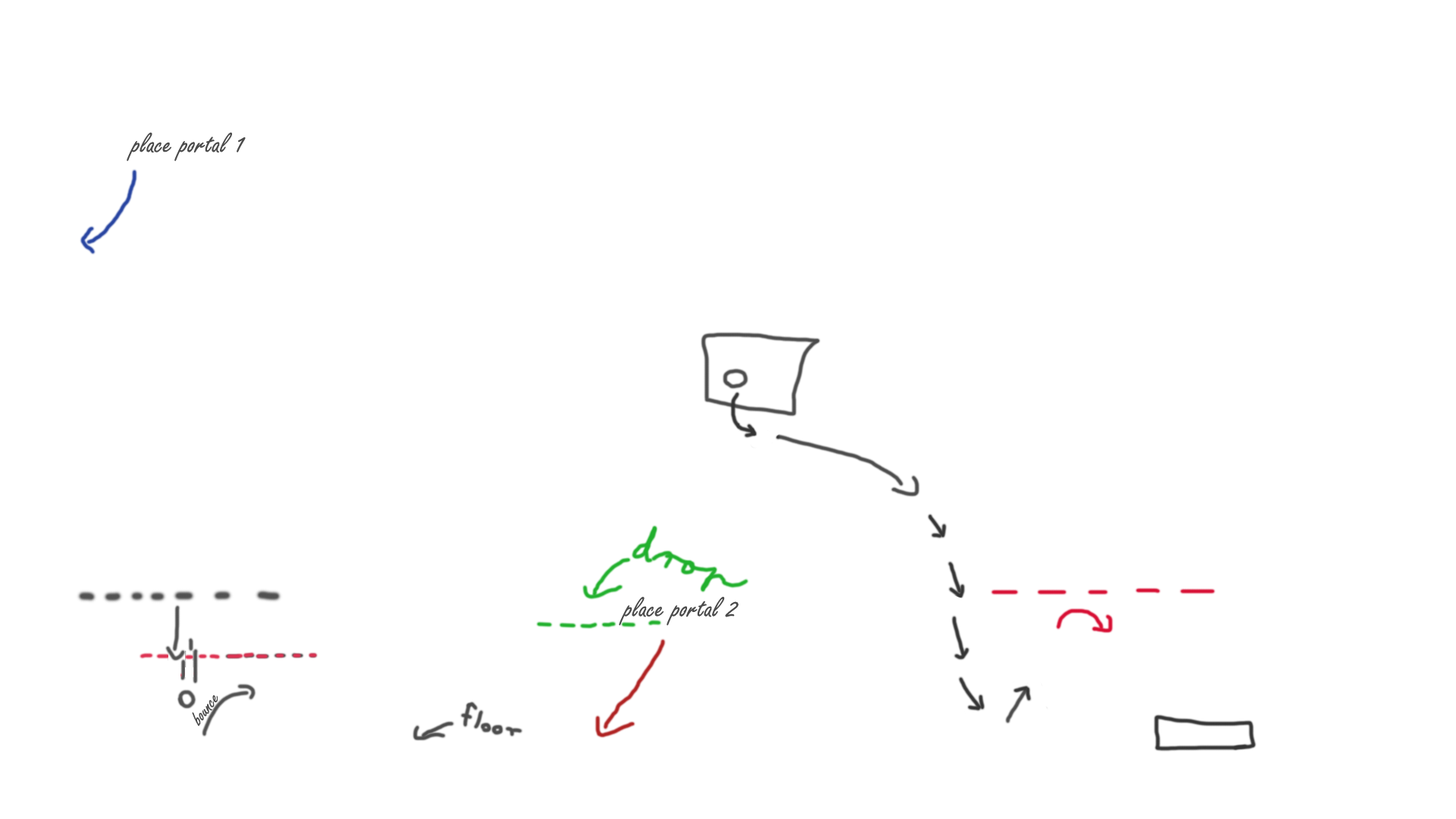
<style>
.page{position:relative;width:1456px;height:819px;background:#ffffff}
.page>*{position:absolute;margin:0}
.t1{font:31.1px "FreestyleScript-Regular";color:#4b4b4b}
.t2{font:22px "FreestyleScript-Regular";color:#4b4b4b}
</style>
<div class="page">
<p class="t1" style="left:127px;top:132px;width:119px;height:30px">place portal 1</p>
<p class="t1" style="left:619px;top:597px;width:120px;height:29px">place portal 2</p>
<p class="t2" style="left:192px;top:695px;width:26px;height:31px;rotate:-53deg">bounce</p>
</div>
